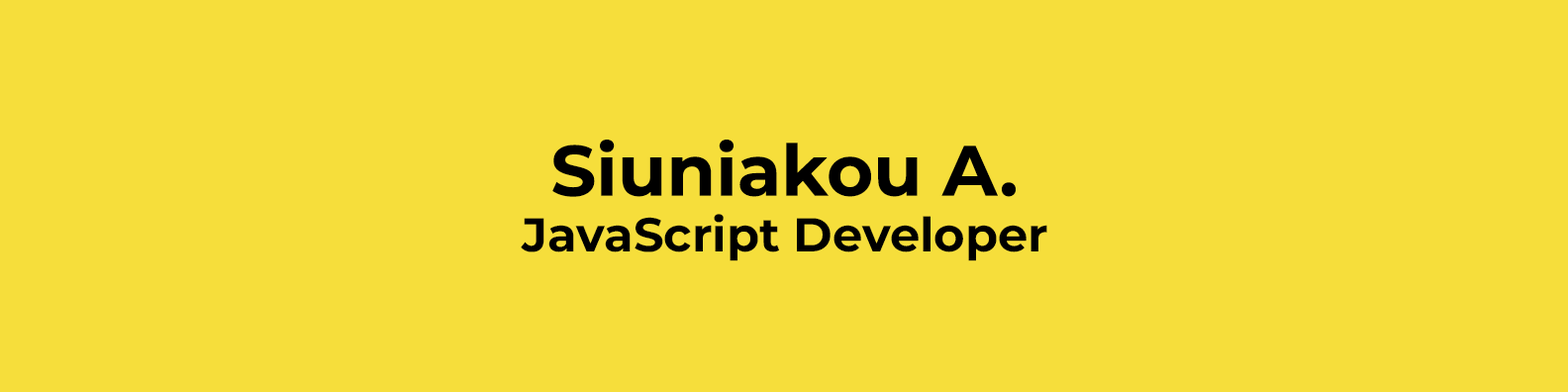
<style>
.page{position:relative;width:1568px;height:392px;background:#f6de3b}
.page>*{position:absolute;margin:0}
.t1{font:71.3px "Montserrat-Bold";color:#000000}
.t2{font:47.5px "Montserrat-Bold";color:#000000}
</style>
<div class="page">
<p class="t1" style="left:552px;top:140px;width:464px;height:57px">Siuniakou A.</p>
<p class="t2" style="left:521px;top:214px;width:526px;height:47px">JavaScript Developer</p>
</div>
